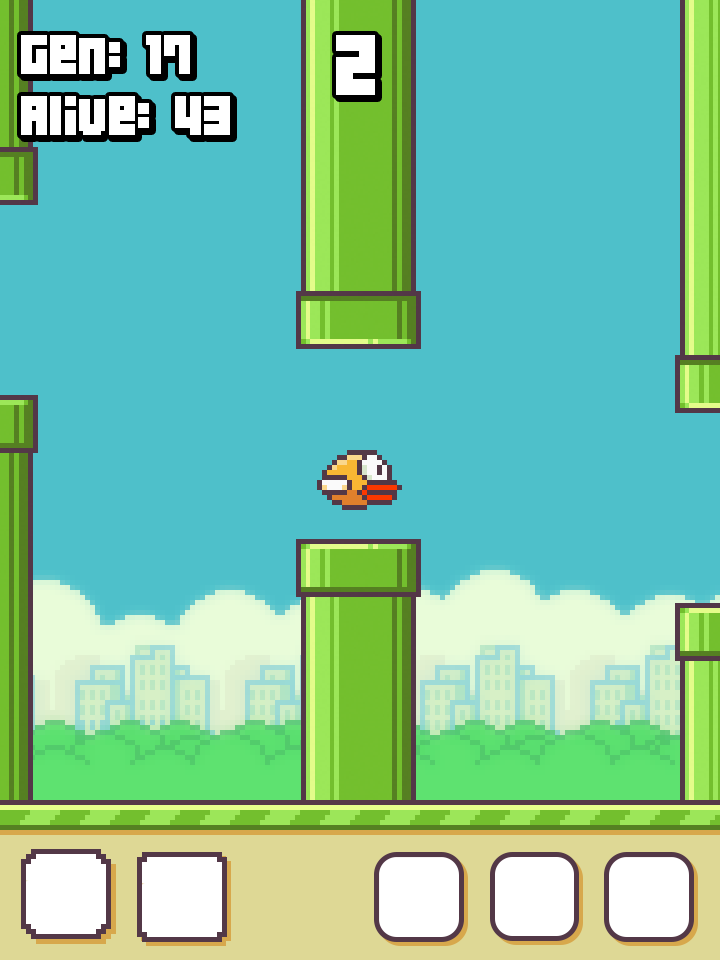
<style>
.page{position:relative;width:720px;height:960px;background:#4ec0ca}
.page>*{position:absolute;margin:0}
.t1{font:49.9px "04b19";color:#ffffff}
.t2{font:76.6px "04b19";color:#ffffff}
</style>
<div class="page">
<p class="t1" style="left:21px;top:35px;width:209px;height:100px">Gen: 17<br>Alive: 43</p>
<p class="t2" style="left:336px;top:35px;width:39px;height:60px">2</p>
</div>
